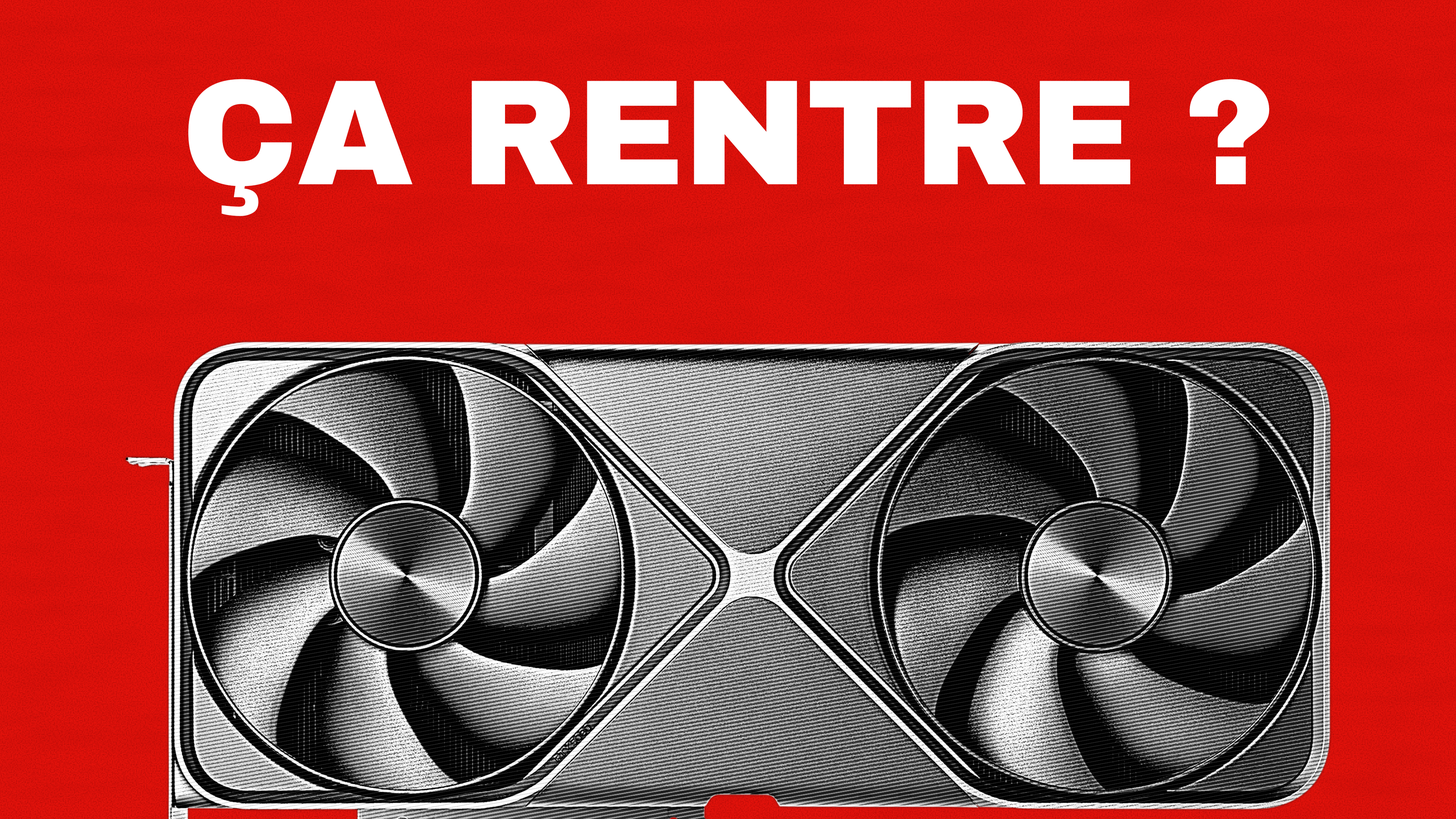
<style>
.page{position:relative;width:1456px;height:819px}
.page>*{position:absolute;margin:0}
.t1{font:150.1px "ArchivoBlack-Regular";letter-spacing:-0.01em;color:#ffffff}
</style>
<div class="page">
<p class="t1" style="left:188px;top:79px;width:1082px;height:138px">ÇA RENTRE ?</p>
</div>
